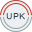
<style>
.page{position:relative;width:32px;height:32px;background:#ecf0f1}
.page>*{position:absolute;margin:0}
.t1{font:8px "HelveticaNeueLTPro-Th";letter-spacing:0.15em;color:#2c3e50;text-transform:uppercase;font-weight:bold}
</style>
<div class="page">
<p class="t1" style="left:6px;top:13px;width:19px;height:7px">UPK</p>
</div>
